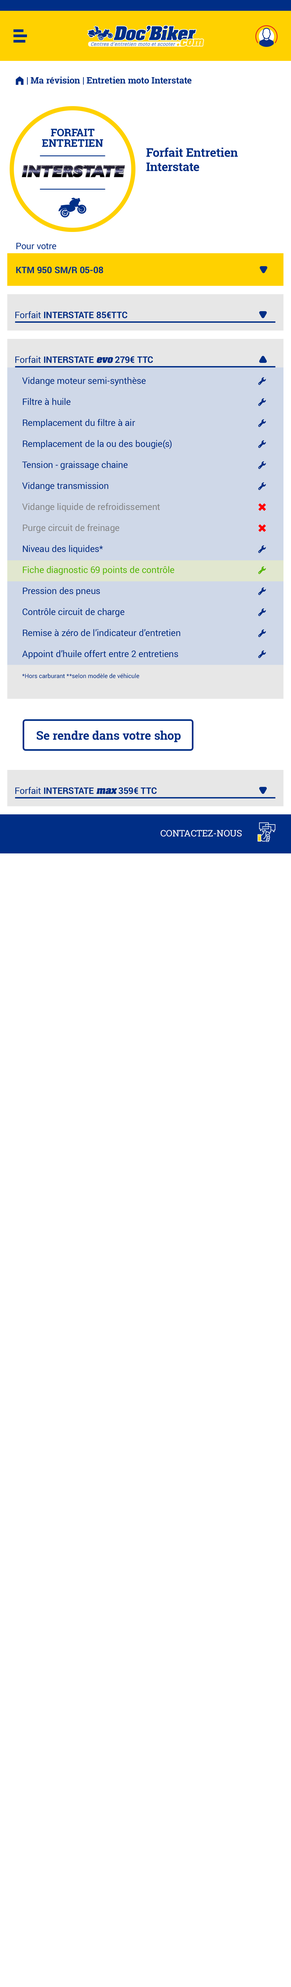
<style>
.page{position:relative;width:291px;height:1987px;background:#ffffff}
.page>*{position:absolute;margin:0}
.t1{font:9px "RobotoSlab-Bold";color:#002e86}
.t2{font:9px "FoundationIconsGeneral-Reg";color:#002e86}
.t3{font:12px "RobotoSlab-Bold";color:#002e86}
.t4{font:9px/24px "Roboto-Bold";color:#002e86}
.t5{font:9px "Roboto-Regular";color:#002e86}
.t6{font:9px "Roboto-Bold";color:#002e86}
.t7{font:9px "Roboto-Bold";color:#002e86;text-transform:uppercase}
.t8{font:9px/21px "Roboto-Regular";color:#002e86}
.t9{font:9px/36px "Roboto-Regular";color:#002e86}
.t10{font:9px/36px "Roboto-Bold";color:#002e86}
.t11{font:9px/27px "Aachen-Bold";color:#002e86;font-style:italic}
.t12{font:9px/27px "Roboto-Bold";color:#002e86}
.t13{font:9px/27px "Roboto-Bold";color:#002e86;text-transform:uppercase}
.t14{font:9px/21px "Roboto-Regular";color:#868686}
.t15{font:9px/21px "Roboto-Regular";color:#56b700}
.t16{font:6px/21px "Roboto-Regular";color:#002e86}
.t17{font:9px "Aachen-Bold";color:#002e86;font-style:italic}
.t18{font:9px "RobotoSlab-Regular";color:#ffffff;text-transform:uppercase}
</style>
<div class="page">
<p class="t1" style="left:16px;top:76px;width:175px;height:9px"><span class="t2">m </span>| Ma révision | Entretien moto Interstate</p>
<p class="t3" style="left:146px;top:147px;width:92px;height:24px">Forfait Entretien<br>Interstate</p>
<p class="t4" style="left:16px;top:243px;width:87px;height:31px"><span class="t5">Pour votre<br></span>KTM 950 SM/R 05-08</p>
<p class="t6" style="left:15px;top:311px;width:112px;height:7px"><span class="t5">Forfait </span>INTERSTATE <span class="t7">85€TTC</span></p>
<p class="t8" style="left:15px;top:356px;width:165px;height:322px"><span class="t9">Forfait </span><span class="t10">INTERSTATE </span><span class="t11">evo</span><span class="t12"> 279</span><span class="t13">€ TTC<br></span>Vidange moteur semi-synthèse<br>Filtre à huile<br>Remplacement du filtre à air<br>Remplacement de la ou des bougie(s)<br>Tension - graissage chaine<br>Vidange transmission<br><span class="t14">Vidange liquide de refroidissement<br>Purge circuit de freinage<br></span>Niveau des liquides*<br><span class="t15">Fiche diagnostic 69 points de contrôle<br></span>Pression des pneus<br>Contrôle circuit de charge<br>Remise à zéro de l’indicateur d’entretien<br>Appoint d’huile offert entre 2 entretiens<br><span class="t16">*Hors carburant **selon modèle de véhicule</span></p>
<p class="t3" style="left:37px;top:730px;width:144px;height:12px">Se rendre dans votre shop</p>
<p class="t6" style="left:15px;top:787px;width:142px;height:7px"><span class="t5">Forfait </span>INTERSTATE <span class="t17">max</span> 35<span class="t7">9€ TTC</span></p>
<p class="t18" style="left:161px;top:830px;width:81px;height:7px">contactez-nous</p>
</div>
